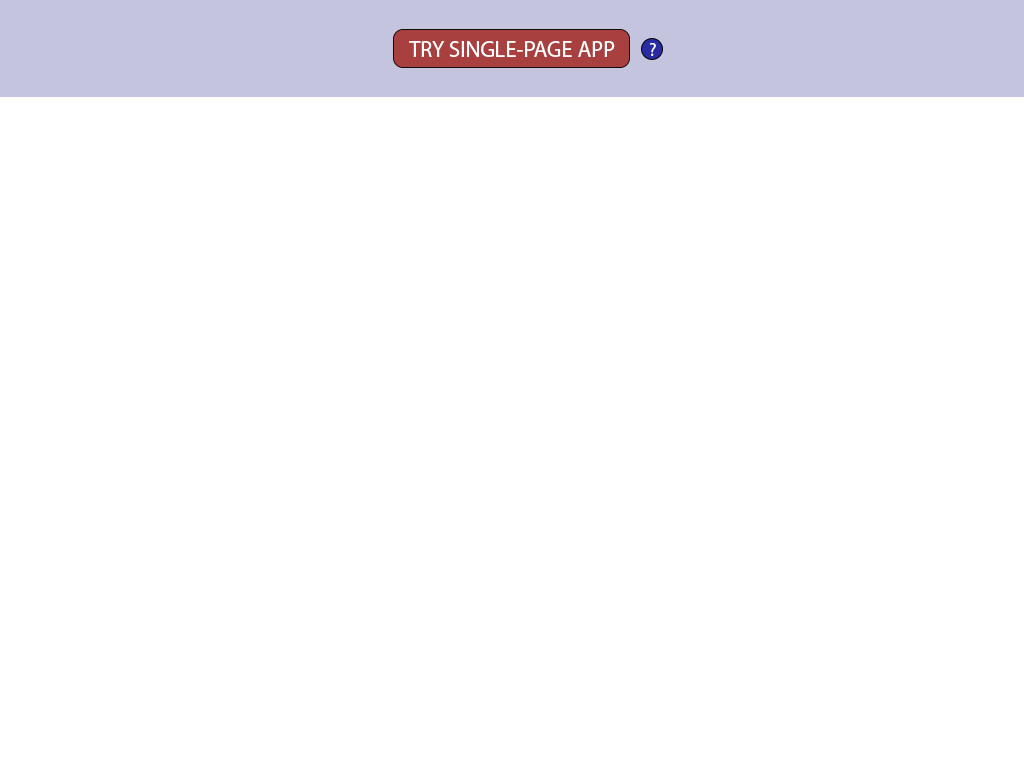
<style>
.page{position:relative;width:1024px;height:768px;background:#ffffff}
.page>*{position:absolute;margin:0}
.t1{font:12px "MyriadPro-Regular";color:#ffffff}
.t2{font:18.8px "MyriadPro-Regular";color:#fefefe}
</style>
<div class="page">
<p class="t1" style="left:409px;top:41px;width:206px;height:16px">TRY SINGLE-PAGE APP</p>
<p class="t2" style="left:649px;top:43px;width:7px;height:13px">?</p>
</div>
